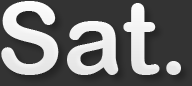
<style>
.page{position:relative;width:192px;height:86px;background:#333333}
.page>*{position:absolute;margin:0}
.t1{font:100px "ArialRoundedMTBold";color:#ffffff}
</style>
<div class="page">
<p class="t1" style="left:1px;top:1px;width:180px;height:74px">Sat.</p>
</div>
